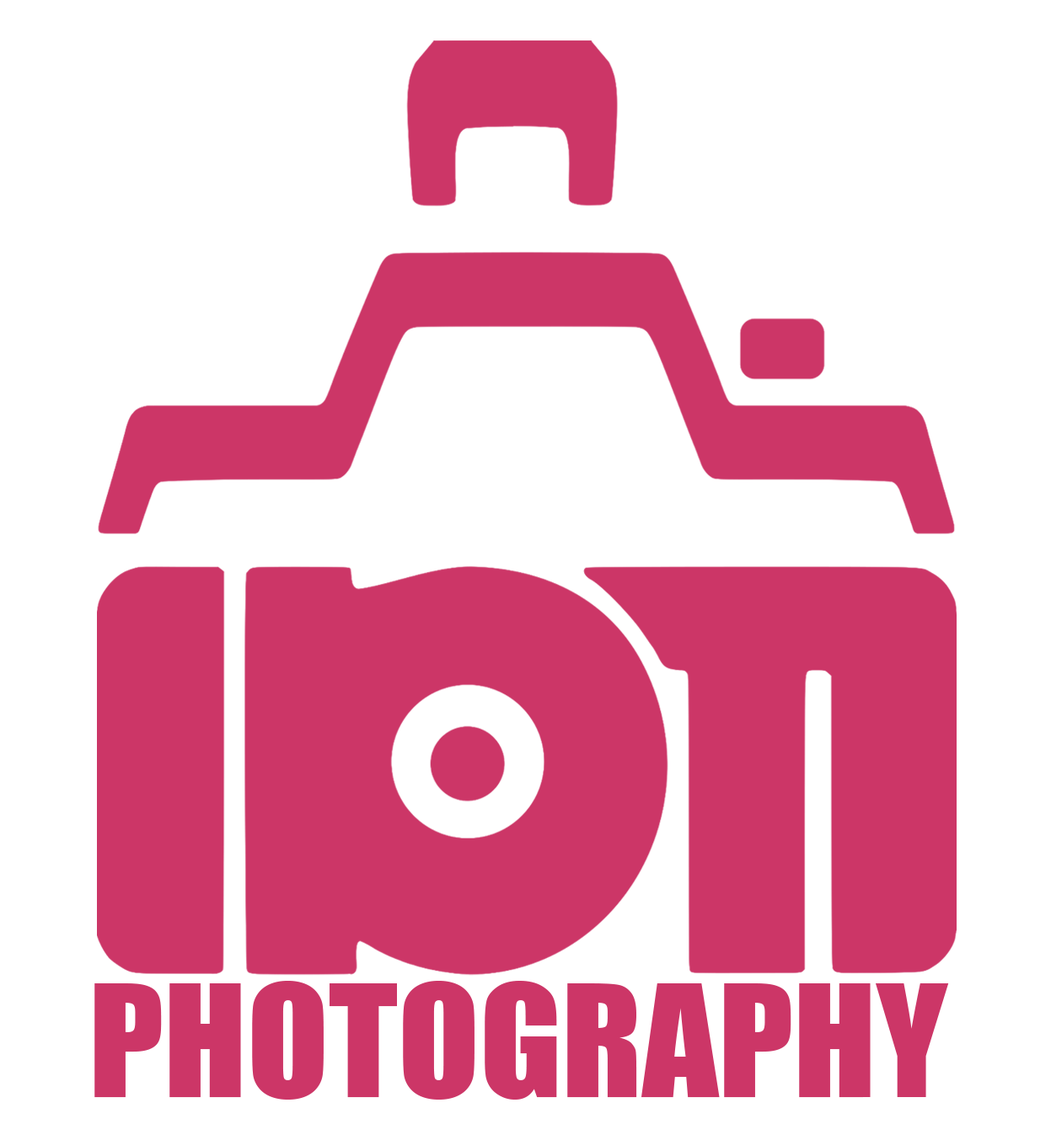
<style>
.page{position:relative;width:1051px;height:1135px;background:#ffffff}
.page>*{position:absolute;margin:0}
.t1{font:144.3px "Impact";color:#cc3667;text-transform:uppercase;scale:1.04 1}
</style>
<div class="page">
<p class="t1" style="left:94px;top:981px;width:855px;height:119px">photography</p>
</div>
